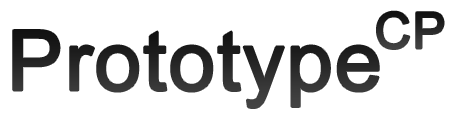
<style>
.page{position:relative;width:455px;height:123px;background:#ffffff}
.page>*{position:absolute;margin:0}
.t1{font:50px "ArialMT";color:#262626;font-weight:bold}
.t2{font:83.3px "ArialMT";color:#262626;font-weight:bold}
</style>
<div class="page">
<p class="t1" style="left:377px;top:11px;width:67px;height:38px">CP</p>
<p class="t2" style="left:13px;top:30px;width:366px;height:78px">Prototype</p>
</div>
